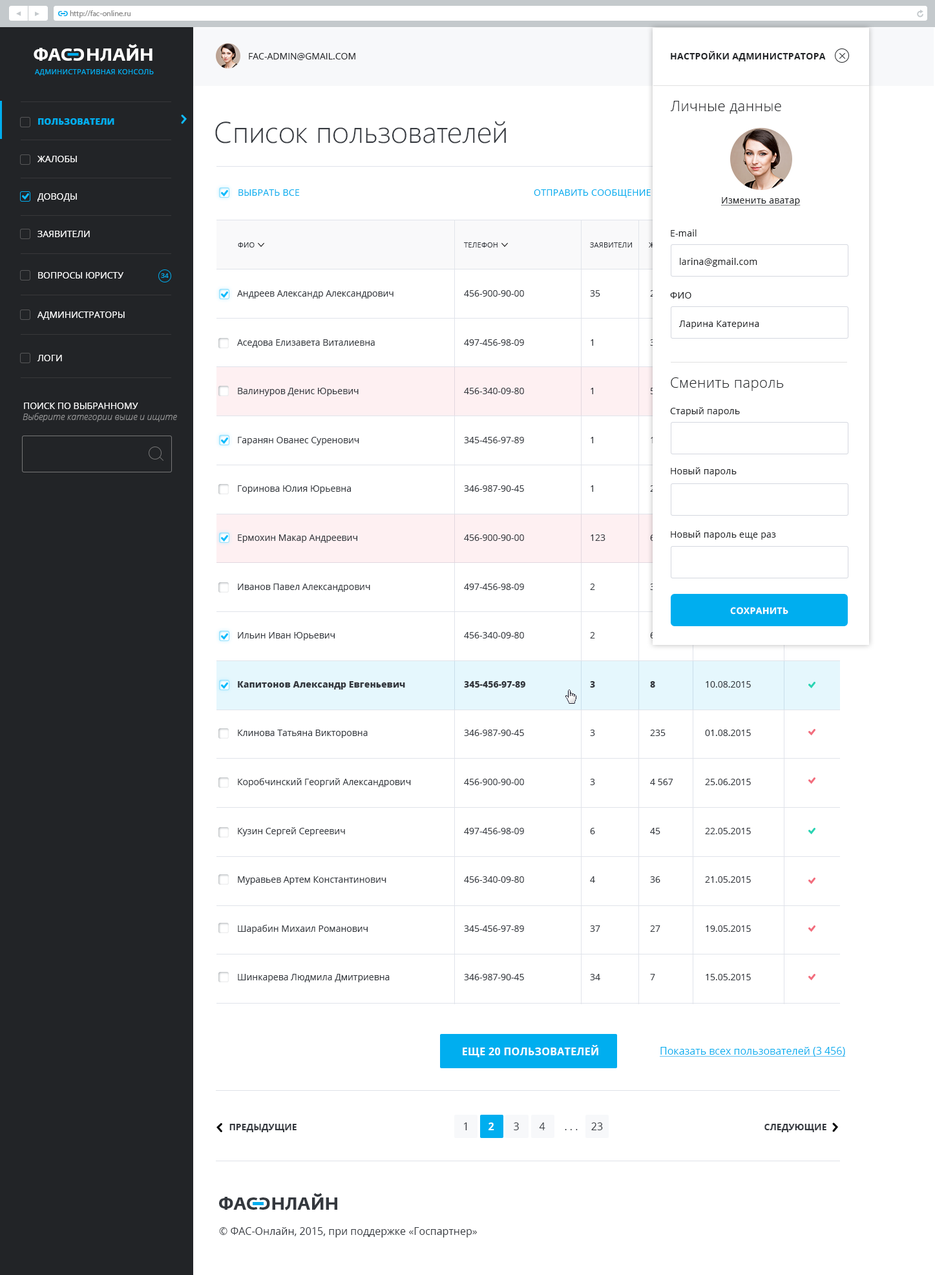
<style>
.page{position:relative;width:935px;height:1275px;background:#ffffff}
.page>*{position:absolute;margin:0}
.t1{font:6.5px "FedraSansPro-Bold";color:#00aeef;text-transform:uppercase}
.t2{font:7.8px "MyriadPro-Regular";color:#8d8d8d}
.t3{font:17.4px "FedraSansPro-Bold";color:#ffffff;text-transform:uppercase}
.t4{font:9px "OpenSans";color:#222427;text-transform:uppercase}
.t5{font:9px "OpenSans-Bold";letter-spacing:0.02em;color:#222427;text-transform:uppercase}
.t6{font:7.1px "OpenSans";letter-spacing:0.03em;color:#00aeef;text-transform:uppercase}
.t7{font:14.2px "OpenSans-Light";letter-spacing:0.02em;color:#222427}
.t8{font:9px "OpenSans-Extrabold";color:#00aeef;text-transform:uppercase}
.t9{font:29.7px "SegoeUI-Light";color:#34383e}
.t10{font:9px "OpenSans";color:#ffffff;text-transform:uppercase}
.t11{font:9px "OpenSans";letter-spacing:0.02em;color:#00aeef;text-transform:uppercase}
.t12{font:9px "OpenSans";letter-spacing:0.02em;color:#222427;text-decoration:underline}
.t13{font:9px "OpenSans";letter-spacing:0.02em;color:#222427}
.t14{font:7.1px "OpenSans";letter-spacing:0.02em;color:#34383e;text-transform:uppercase}
.t15{font:6.5px "OpenSans";color:#00aeef}
.t16{font:9px "OpenSans";color:#34383e}
.t17{font:9px "OpenSans-Extrabold";color:#34383e}
.t18{font:9px "OpenSans";color:#34383e;text-transform:uppercase}
.t19{font:9px "OpenSans-Extrabold";color:#34383e;text-transform:uppercase}
.t20{font:9px "OpenSans";text-transform:uppercase}
.t21{font:9px "OpenSansLight-Italic";color:#959596}
.t22{font:9px "OpenSans-Bold";letter-spacing:0.03em;color:#fefefe;text-transform:uppercase}
.t23{font:10.3px "OpenSans-Bold";letter-spacing:0.02em;color:#ffffff;text-transform:uppercase}
.t24{font:10.3px "OpenSans";color:#00aeef;text-decoration:underline}
.t25{font:9px "OpenSans-Bold";color:#34383e;text-transform:uppercase}
.t26{font:10.3px "OpenSans";color:#34383e}
.t27{font:10.3px "OpenSans-Bold";color:#ffffff}
.t28{font:17.4px "FedraSansPro-Bold";color:#34383e;text-transform:uppercase}
</style>
<div class="page">
<p class="t1" style="left:58px;top:11px;width:5px;height:5px">c</p>
<p class="t1" style="left:63px;top:11px;width:5px;height:5px;rotate:180deg">c</p>
<p class="t2" style="left:70px;top:10px;width:61px;height:8px">http://fac-online.ru</p>
<p class="t3" style="left:34px;top:44px;width:119px;height:17px">ФАc   НЛАЙН</p>
<p class="t3" style="left:73px;top:48px;width:11px;height:13px;rotate:180deg">c</p>
<p class="t4" style="left:249px;top:53px;width:106px;height:7px">FAC-Admin@gmail.com</p>
<p class="t5" style="left:671px;top:51px;width:155px;height:10px">НАстройки администратора</p>
<p class="t6" style="left:35px;top:69px;width:119px;height:7px">Административная консоль</p>
<p class="t7" style="left:670px;top:101px;width:111px;height:13px">Личные данные</p>
<p class="t8" style="left:38px;top:118px;width:76px;height:7px">Пользователи</p>
<p class="t9" style="left:215px;top:121px;width:291px;height:22px">Список пользователей</p>
<p class="t10" style="left:37px;top:156px;width:40px;height:6px">жалобы</p>
<p class="t10" style="left:37px;top:193px;width:40px;height:9px">Доводы</p>
<p class="t11" style="left:238px;top:189px;width:61px;height:7px">Выбрать все</p>
<p class="t11" style="left:534px;top:189px;width:117px;height:9px">Отправить Сообщение</p>
<p class="t12" style="left:721px;top:197px;width:80px;height:9px">Изменить аватар</p>
<p class="t10" style="left:37px;top:231px;width:53px;height:6px">ЗАявители</p>
<p class="t13" style="left:671px;top:229px;width:26px;height:8px">E-mail</p>
<p class="t14" style="left:238px;top:242px;width:17px;height:6px">ФИО</p>
<p class="t14" style="left:464px;top:242px;width:34px;height:6px">Телефон</p>
<p class="t14" style="left:590px;top:242px;width:42px;height:6px">Заявители</p>
<p class="t13" style="left:680px;top:258px;width:77px;height:9px">larina@gmail.com</p>
<p class="t10" style="left:38px;top:272px;width:85px;height:7px">вопросы юристу</p>
<p class="t15" style="left:161px;top:273px;width:8px;height:5px">34</p>
<p class="t16" style="left:237px;top:290px;width:174px;height:692px">Андреев Александр Александрович<br>Аседова Елизавета Виталиевна<br>Валинуров Денис Юрьевич<br>Гаранян Ованес Суренович<br>Горинова Юлия Юрьевна<br>Ермохин Макар Андреевич<br>Иванов Павел Александрович<br>Ильин Иван Юрьевич<br><span class="t17">Капитонов Александр Евгеньевич<br></span>Клинова Татьяна Викторовна<br>Коробчинский Георгий Александрович<br>Кузин Сергей Сергеевич<br>Муравьев Артем Константинович<br>Шарабин Михаил Романович<br>Шинкарева Людмила Дмитриевна</p>
<p class="t16" style="left:464px;top:290px;width:61px;height:690px">456-900-90-00<br>497-456-98-09<br>456-340-09-80<br>345-456-97-89<br>346-987-90-45<br>456-900-90-00<br>497-456-98-09<br>456-340-09-80<br><span class="t17">345-456-97-89<br></span>346-987-90-45<br>456-900-90-00<br>497-456-98-09<br>456-340-09-80<br>345-456-97-89<br>346-987-90-45</p>
<p class="t18" style="left:590px;top:290px;width:16px;height:690px">35<br>1<br>1<br>1<br>1<br>123<br>2<br>2<br><span class="t19">3<br></span>3<br>3<br>6<br>4<br>37<br>34</p>
<p class="t18" style="left:650px;top:290px;width:23px;height:690px">29<br>34<br>56<br>1<br>2<br>64<br>3<br>6<br><span class="t19">8<br></span>235<br>4 567<br>45<br>36<br>27<br>7</p>
<p class="t13" style="left:670px;top:292px;width:22px;height:7px">ФИО</p>
<p class="t20" style="left:705px;top:290px;width:46px;height:690px">22.01.2016<br>20.01.2016<br>16.01.2016<br>01.01.2016<br>27.12.2015<br>20.12.2015<br>10.12.2015<br>30.09.2015<br>10.08.2015<br>01.08.2015<br>25.06.2015<br>22.05.2015<br>21.05.2015<br>19.05.2015<br>15.05.2015</p>
<p class="t10" style="left:37px;top:312px;width:88px;height:8px">Администраторы</p>
<p class="t13" style="left:679px;top:321px;width:80px;height:8px">Ларина Катерина</p>
<p class="t10" style="left:37px;top:355px;width:25px;height:6px">ЛОги</p>
<p class="t7" style="left:671px;top:377px;width:113px;height:14px">Сменить пароль</p>
<p class="t21" style="left:23px;top:413px;width:154px;height:9px">Выберите категории выше и ищите</p>
<p class="t10" style="left:24px;top:403px;width:114px;height:6px">Поиск по выбранному</p>
<p class="t13" style="left:670px;top:407px;width:70px;height:9px">Старый пароль</p>
<p class="t13" style="left:671px;top:467px;width:66px;height:9px">Новый пароль</p>
<p class="t13" style="left:671px;top:531px;width:105px;height:9px">Новый пароль еще раз</p>
<p class="t22" style="left:730px;top:607px;width:58px;height:8px">Сохранить</p>
<p class="t23" style="left:463px;top:1045px;width:135px;height:12px">еще 20 пользователей</p>
<p class="t24" style="left:660px;top:1047px;width:186px;height:10px">Показать всех пользователей (3 456)</p>
<p class="t25" style="left:229px;top:1124px;width:68px;height:8px">Предыдущие</p>
<p class="t26" style="left:464px;top:1123px;width:3px;height:7px">1</p>
<p class="t27" style="left:489px;top:1123px;width:5px;height:7px">2</p>
<p class="t26" style="left:514px;top:1123px;width:5px;height:7px">3</p>
<p class="t26" style="left:539px;top:1123px;width:6px;height:7px">4</p>
<p class="t26" style="left:565px;top:1129px;width:13px;height:1px">. . .</p>
<p class="t26" style="left:591px;top:1123px;width:12px;height:7px">23</p>
<p class="t25" style="left:765px;top:1124px;width:62px;height:8px">Следующие</p>
<p class="t28" style="left:219px;top:1193px;width:118px;height:17px">ФАc   НЛАЙН</p>
<p class="t28" style="left:259px;top:1198px;width:11px;height:12px;rotate:180deg">c</p>
<p class="t26" style="left:219px;top:1227px;width:258px;height:11px">© ФАС-Онлайн, 2015, при поддержке «Госпартнер»</p>
</div>
